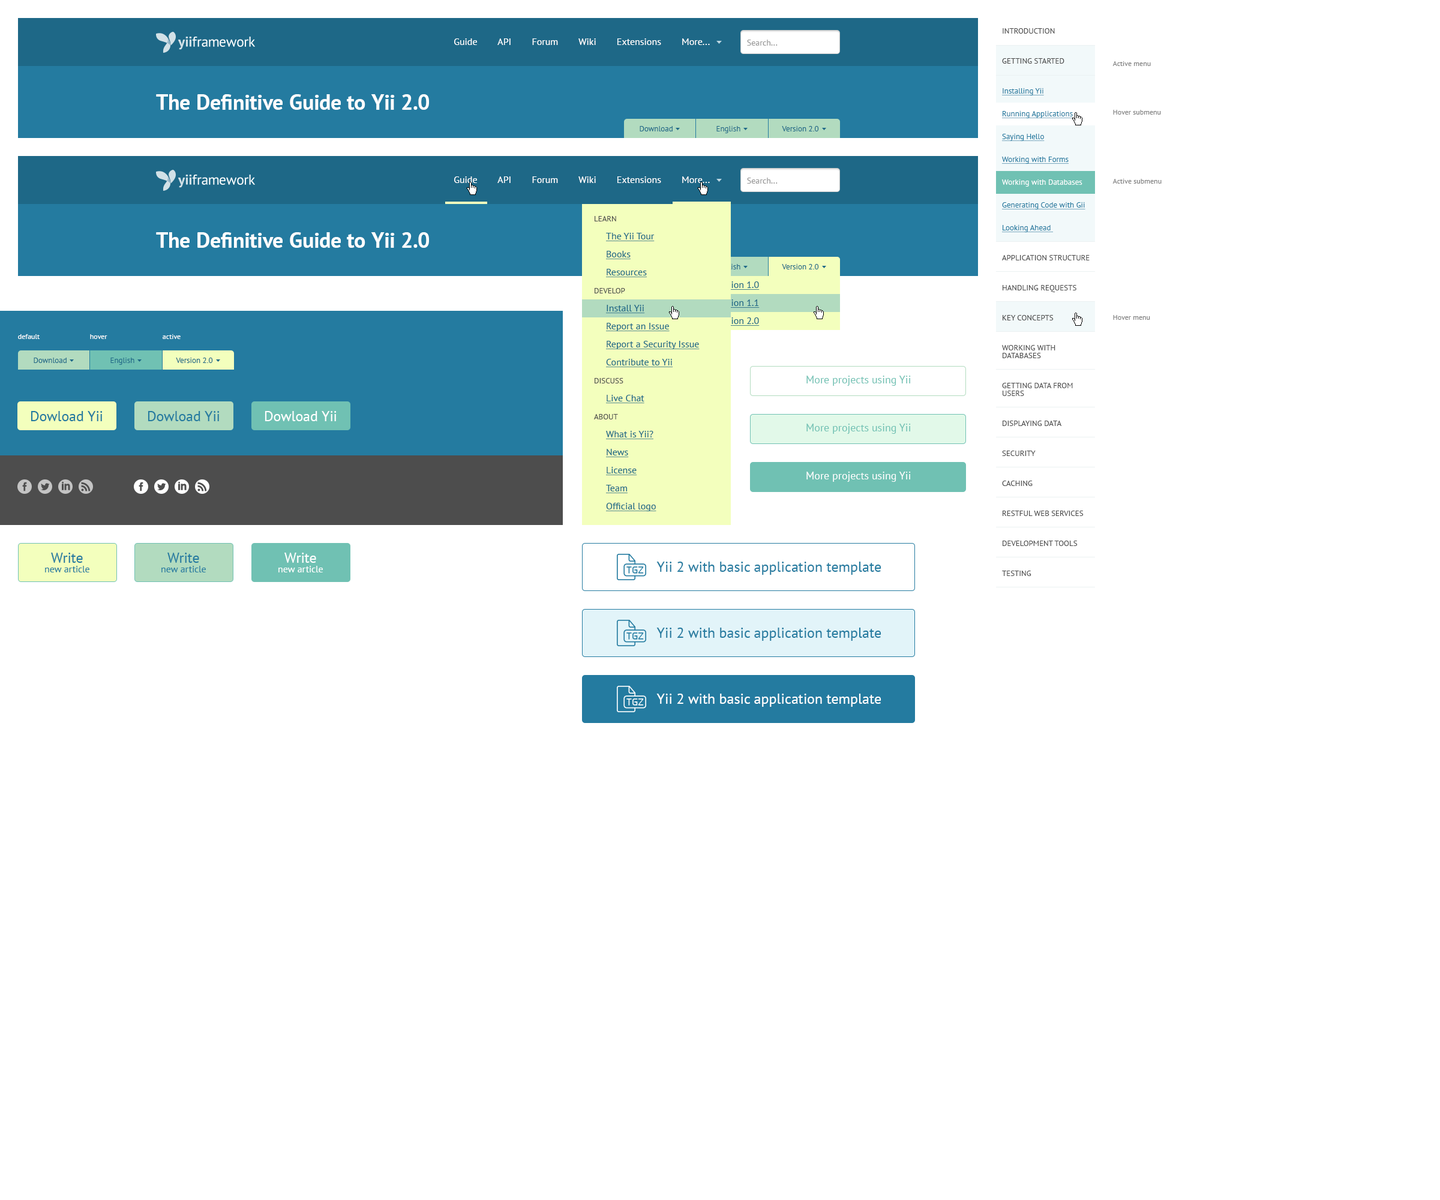
<style>
.page{position:relative;width:1440px;height:1200px;background:#ffffff}
.page>*{position:absolute;margin:0}
.t1{font:7.8px/30px "PTSans-Regular";color:#4d4d4d;text-transform:uppercase}
.t2{font:7.8px/30px "PTSans-Regular";color:#247ba0;text-decoration:underline}
.t3{font:7.8px/22.8px "PTSans-Regular";color:#247ba0;text-decoration:underline}
.t4{font:7.8px/22.8px "PTSans-Regular";color:#ffffff}
.t5{font:7.8px/15px "PTSans-Regular";color:#4d4d4d;text-transform:uppercase}
.t6{font:7.8px/7.8px "PTSans-Regular";color:#4d4d4d;text-transform:uppercase}
.t7{font:9.6px "PTSans-Regular";color:#ffffff}
.t8{font:8.4px "PTSans-Regular";color:#999999}
.t9{font:7.2px "PTSans-Regular";color:#808080}
.t10{font:21.6px "PTSans-Bold";color:#ffffff}
.t11{font:7.8px "PTSans-Regular";color:#1e6887}
.t12{font:9.6px/18px "PTSans-Regular";color:#1e6887;text-decoration:underline}
.t13{font:7.8px/18px "PTSans-Regular";color:#4d4d4d;text-transform:uppercase}
.t14{font:7.8px "PTSans-Regular";color:#f3ffbd}
.t15{font:9.6px/18px "PTSans-Regular";text-decoration:underline}
.t16{font:7.2px "PTSans-Regular";color:#ffffff}
.t17{font:10.8px "PTSans-Regular";color:#70c1b3}
.t18{font:14.4px "PTSans-Regular";color:#247ba0}
.t19{font:14.4px "PTSans-Regular";color:#ffffff}
.t20{font:10.8px "PTSans-Regular";color:#ffffff}
.t21{font:9.6px/9.6px "PTSans-Regular";color:#247ba0}
.t22{font:14.4px/14.4px "PTSans-Regular";color:#247ba0}
.t23{font:9.6px/9.6px "PTSans-Regular";color:#ffffff}
.t24{font:14.4px/14.4px "PTSans-Regular";color:#ffffff}
</style>
<div class="page">
<p class="t1" style="left:1002px;top:28px;width:88px;height:548px">Introduction <br>Getting Started<br><span class="t2">Installing Yii<br></span><span class="t3">Running Applications<br>Saying Hello<br>Working with Forms<br></span><span class="t4">Working with Databases<br></span><span class="t3">Generating Code with Gii<br>Looking Ahead <br></span>Application <span class="t5">Structure <br></span>Handling Requests <br>Key Concepts <br>Working with <span class="t6">Databases <br></span>Getting Data from <span class="t6">Users <br></span>Displaying Data <br>Security <br>Caching <br>RESTful Web Services <br>Development Tools <br>Testing <br>Special Topics <br>Widgets <br>Helpers</p>
<p class="t7" style="left:454px;top:38px;width:256px;height:7px">Guide        API        Forum        Wiki        Extensions        More...</p>
<p class="t8" style="left:747px;top:40px;width:31px;height:6px">Search...</p>
<p class="t9" style="left:1112px;top:61px;width:39px;height:5px">Active menu</p>
<p class="t10" style="left:156px;top:94px;width:273px;height:16px">The Definitive Guide to Yii 2.0</p>
<p class="t9" style="left:1113px;top:110px;width:48px;height:5px">Hover submenu</p>
<p class="t11" style="left:640px;top:126px;width:33px;height:5px">Download</p>
<p class="t11" style="left:716px;top:126px;width:24px;height:7px">English</p>
<p class="t11" style="left:782px;top:126px;width:37px;height:5px">Version 2.0</p>
<p class="t7" style="left:454px;top:176px;width:256px;height:7px">Guide        API        Forum        Wiki        Extensions        More...</p>
<p class="t8" style="left:747px;top:178px;width:31px;height:6px">Search...</p>
<p class="t9" style="left:1112px;top:179px;width:50px;height:5px">Active submenu</p>
<p class="t12" style="left:594px;top:216px;width:106px;height:295px"><span class="t13">Learn<br></span>The Yii Tour<br>Books<br>Resources<br><span class="t13">Develop<br></span>Install Yii<br>Report an Issue<br>Report a Security Issue<br>Contribute to Yii<br><span class="t13">Discuss<br></span>Live Chat<br><span class="t13">About<br></span>What is Yii?<br>News<br>License<br>Team<br>Official logo</p>
<p class="t10" style="left:156px;top:232px;width:273px;height:16px">The Definitive Guide to Yii 2.0</p>
<p class="t14" style="left:716px;top:264px;width:24px;height:7px">English</p>
<p class="t11" style="left:782px;top:264px;width:37px;height:5px">Version 2.0</p>
<p class="t15" style="left:713px;top:281px;width:47px;height:45px">Version 1.0<br>Version 1.1<br>Version 2.0</p>
<p class="t9" style="left:1113px;top:315px;width:37px;height:5px">Hover menu</p>
<p class="t16" style="left:18px;top:334px;width:22px;height:5px">default</p>
<p class="t16" style="left:90px;top:334px;width:17px;height:5px">hover</p>
<p class="t16" style="left:163px;top:334px;width:18px;height:5px">active</p>
<p class="t11" style="left:34px;top:358px;width:33px;height:5px">Download</p>
<p class="t11" style="left:110px;top:358px;width:24px;height:7px">English</p>
<p class="t11" style="left:176px;top:358px;width:37px;height:5px">Version 2.0</p>
<p class="t17" style="left:806px;top:376px;width:105px;height:10px">More projects using Yii</p>
<p class="t18" style="left:31px;top:411px;width:72px;height:10px">Dowload Yii</p>
<p class="t18" style="left:148px;top:411px;width:72px;height:10px">Dowload Yii</p>
<p class="t19" style="left:265px;top:411px;width:72px;height:10px">Dowload Yii</p>
<p class="t17" style="left:806px;top:424px;width:105px;height:10px">More projects using Yii</p>
<p class="t20" style="left:806px;top:472px;width:105px;height:10px">More projects using Yii</p>
<p class="t21" style="left:45px;top:553px;width:44px;height:19px;text-align:center"><span class="t22">Write<br></span>new article</p>
<p class="t21" style="left:161px;top:553px;width:45px;height:19px;text-align:center"><span class="t22">Write<br></span>new article</p>
<p class="t23" style="left:278px;top:553px;width:45px;height:19px;text-align:center"><span class="t24">Write<br></span>new article</p>
<p class="t18" style="left:656px;top:562px;width:225px;height:13px">Yii 2 with basic application template</p>
<p class="t18" style="left:656px;top:628px;width:225px;height:13px">Yii 2 with basic application template</p>
<p class="t19" style="left:656px;top:694px;width:225px;height:13px">Yii 2 with basic application template</p>
</div>
